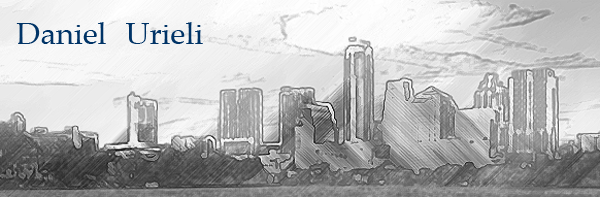
<style>
.page{position:relative;width:600px;height:197px}
.page>*{position:absolute;margin:0}
.t1{font:30px "PalatinoLinotype-Roman";color:#003366;scale:1.03 1}
</style>
<div class="page">
<p class="t1" style="left:16px;top:22px;width:90px;height:22px">Daniel</p>
<p class="t1" style="left:126px;top:22px;width:77px;height:22px">Urieli</p>
</div>
